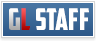
<style>
.page{position:relative;width:96px;height:42px;background:#ffffff}
.page>*{position:absolute;margin:0}
.t1{font:30px "AmericanCaptain"}
.t2{font:30px "AmericanCaptain";color:#ffffff}
</style>
<div class="page">
<p class="t1" style="left:9px;top:8px;width:22px;height:22px">GL</p>
<p class="t2" style="left:36px;top:8px;width:53px;height:22px">Staff</p>
</div>
